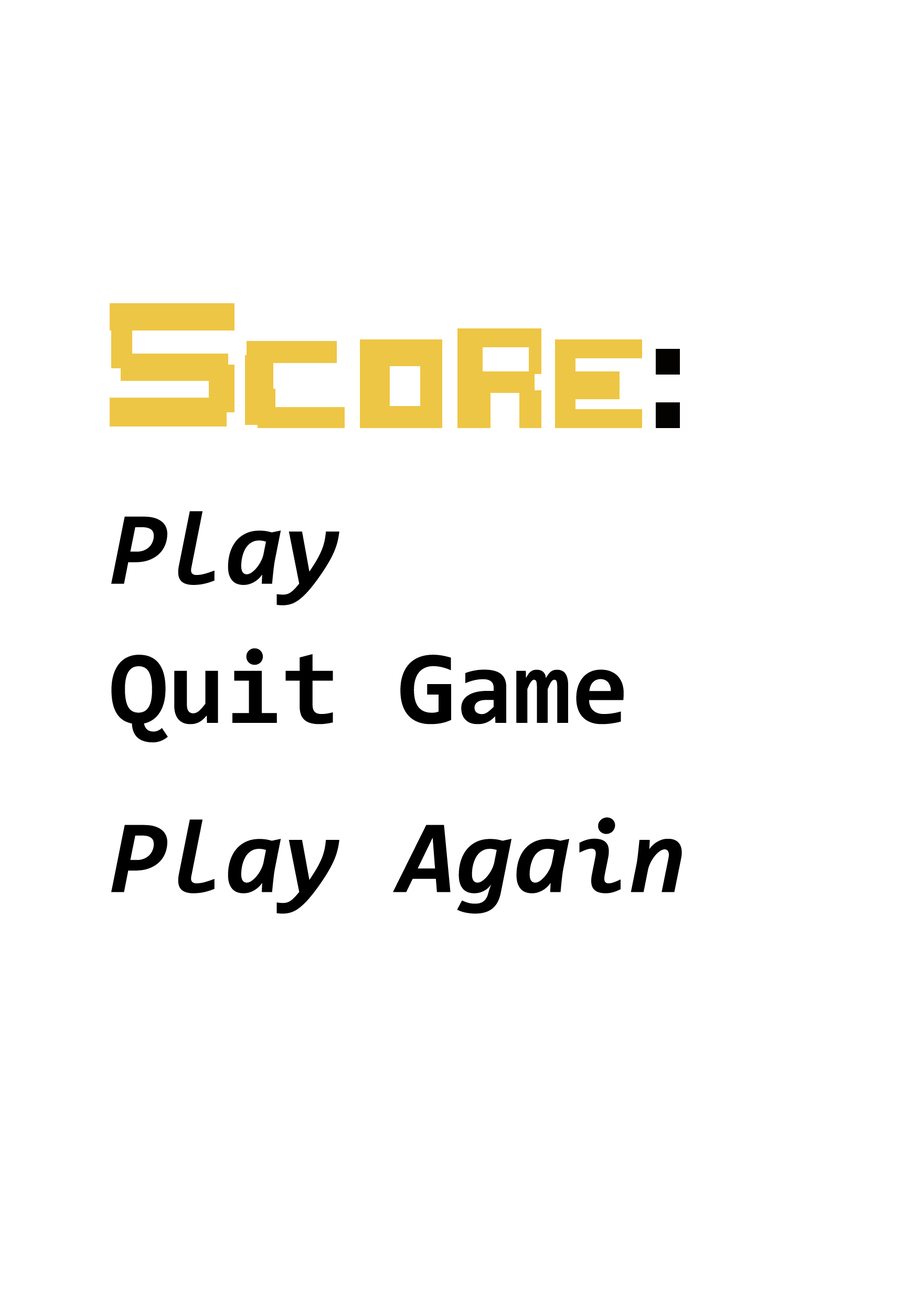
<style>
.page{position:relative;width:917px;height:1301px;background:#ffffff}
.page>*{position:absolute;margin:0}
.t1{font:104.9px "Consolas-BoldItalic";color:#000000}
.t2{font:104.9px "Consolas-Bold";color:#000000}
</style>
<div class="page">
<p class="t1" style="left:111px;top:511px;width:228px;height:94px">Play</p>
<p class="t2" style="left:111px;top:648px;width:513px;height:95px">Quit Game</p>
<p class="t1" style="left:111px;top:817px;width:571px;height:97px">Play Again</p>
</div>
